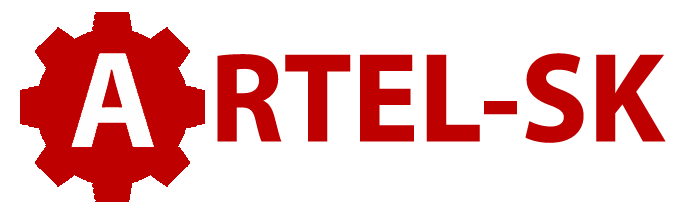
<style>
.page{position:relative;width:690px;height:215px;background:#ffffff}
.page>*{position:absolute;margin:0}
.t1{font:128.4px "MyriadPro-Bold";color:#bf0000}
</style>
<div class="page">
<p class="t1" style="left:79px;top:53px;width:587px;height:90px">А  RTEL-SK</p>
</div>
